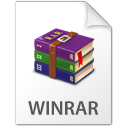
<style>
.page{position:relative;width:128px;height:128px;background:#ffffff}
.page>*{position:absolute;margin:0}
.t1{font:20px "MyriadPro-Semibold";letter-spacing:-0.01em;color:#575757}
</style>
<div class="page">
<p class="t1" style="left:28px;top:101px;width:71px;height:14px">WINRAR</p>
</div>
